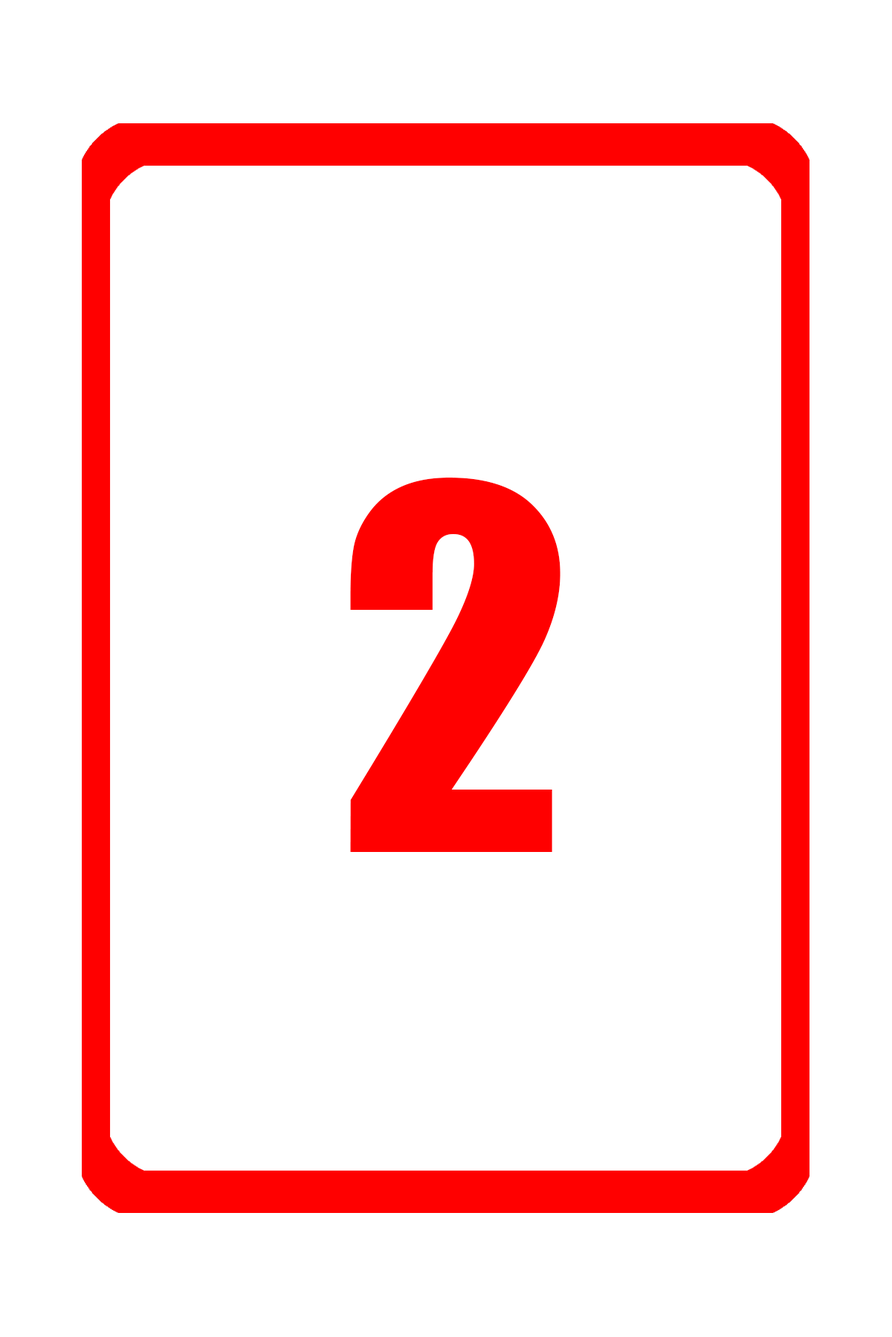
<style>
.page{position:relative;width:892px;height:1337px;background:#ffffff}
.page>*{position:absolute;margin:0}
.t1{font:464.4px "Impact";color:#ff0000}
</style>
<div class="page">
<p class="t1" style="left:350px;top:478px;width:210px;height:374px">2</p>
</div>
